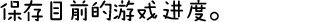
<style>
.page{position:relative;width:328px;height:22px;background:#ffffff}
.page>*{position:absolute;margin:0}
.t1{font:26px "¢è?";color:#000000}
</style>
<div class="page">
<p class="t1" style="left:0px;top:0px;width:219px;height:22px">保存目前的游戏进度。</p>
</div>
